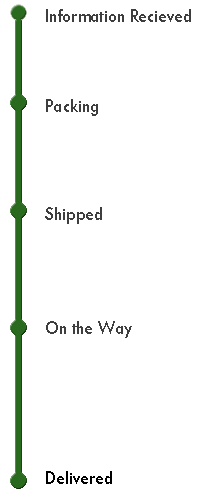
<style>
.page{position:relative;width:206px;height:500px;background:#ffffff}
.page>*{position:absolute;margin:0}
.t1{font:20px "TwCenMT-Regular";color:#3e3e3e;scale:0.89 1}
.t2{font:20px "TwCenMT-Regular";color:#000000;scale:0.89 1}
</style>
<div class="page">
<p class="t1" style="left:45px;top:9px;width:146px;height:475px">Information Recieved<br><br><br><br><br><br>Packing<br><br><br><br><br>Shipped<br><br><br><br><br><br>On the Way          <br><br><br><br><br><br><br><span class="t2">Delivered</span></p>
</div>
